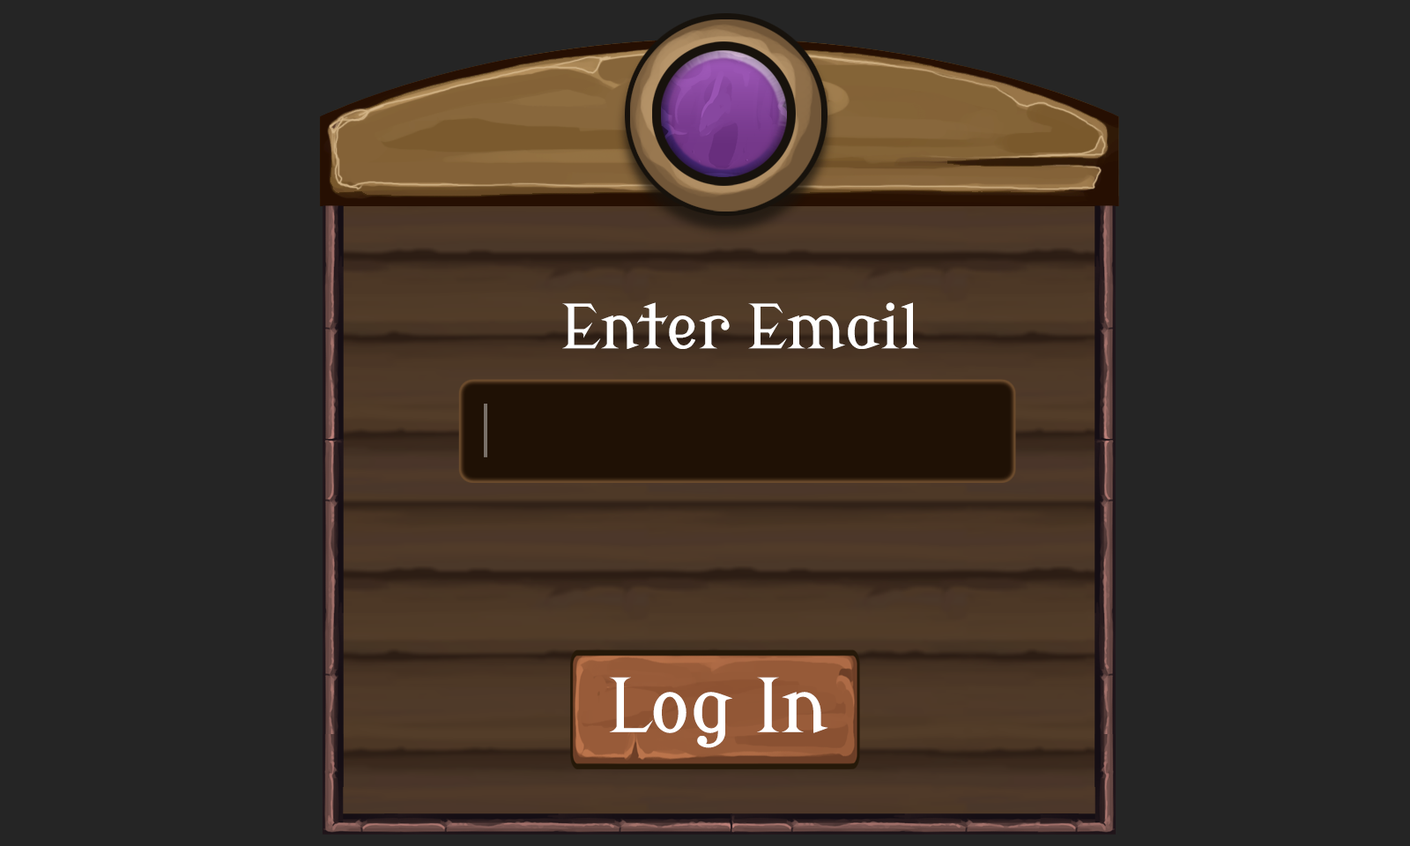
<style>
.page{position:relative;width:1410px;height:846px;background:#252525}
.page>*{position:absolute;margin:0}
.t1{font:60.5px "ModernAntiqua-Regular";color:#ffffff}
.t2{font:73.7px "ModernAntiqua-Regular";color:#ffffff}
</style>
<div class="page">
<p class="t1" style="left:562px;top:302px;width:357px;height:47px">Enter Email</p>
<p class="t2" style="left:609px;top:677px;width:219px;height:71px">Log In</p>
</div>
